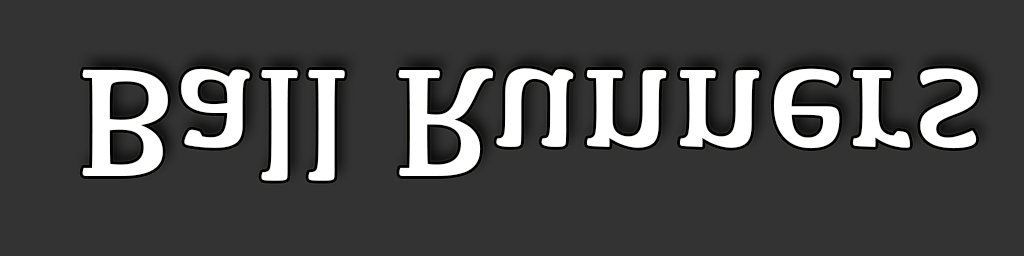
<style>
.page{position:relative;width:1024px;height:256px;background:#333333}
.page>*{position:absolute;margin:0}
.t1{font:158.8px "Kefa-Regular";color:#ffffff}
</style>
<div class="page">
<p class="t1" style="left:82px;top:68px;width:896px;height:113px">Ball Runners</p>
</div>
